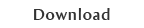
<style>
.page{position:relative;width:144px;height:28px;background:#ffffff}
.page>*{position:absolute;margin:0}
.t1{font:16px "AmiraParadiso";letter-spacing:0.05em;color:#333333}
</style>
<div class="page">
<p class="t1" style="left:34px;top:8px;width:76px;height:12px">Download</p>
</div>
